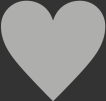
<style>
.page{position:relative;width:106px;height:101px;background:#aeaead}
.page>*{position:absolute;margin:0}
.t1{font:124.7px "KozGoPr6N-Regular";color:#aeaead;scale:1.04 1}
</style>
<div class="page">
<p class="t1" style="left:0px;top:0px;width:106px;height:101px">♥</p>
</div>
